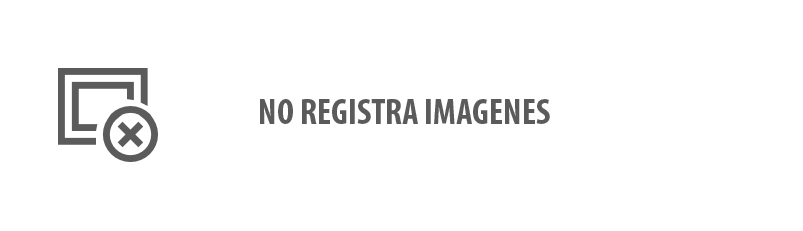
<style>
.page{position:relative;width:803px;height:231px;background:#ffffff}
.page>*{position:absolute;margin:0}
.t1{font:36px "MyriadPro-BoldCond";color:#5b5b5b}
</style>
<div class="page">
<p class="t1" style="left:260px;top:99px;width:290px;height:25px">NO REGISTRA IMAGENES</p>
</div>
